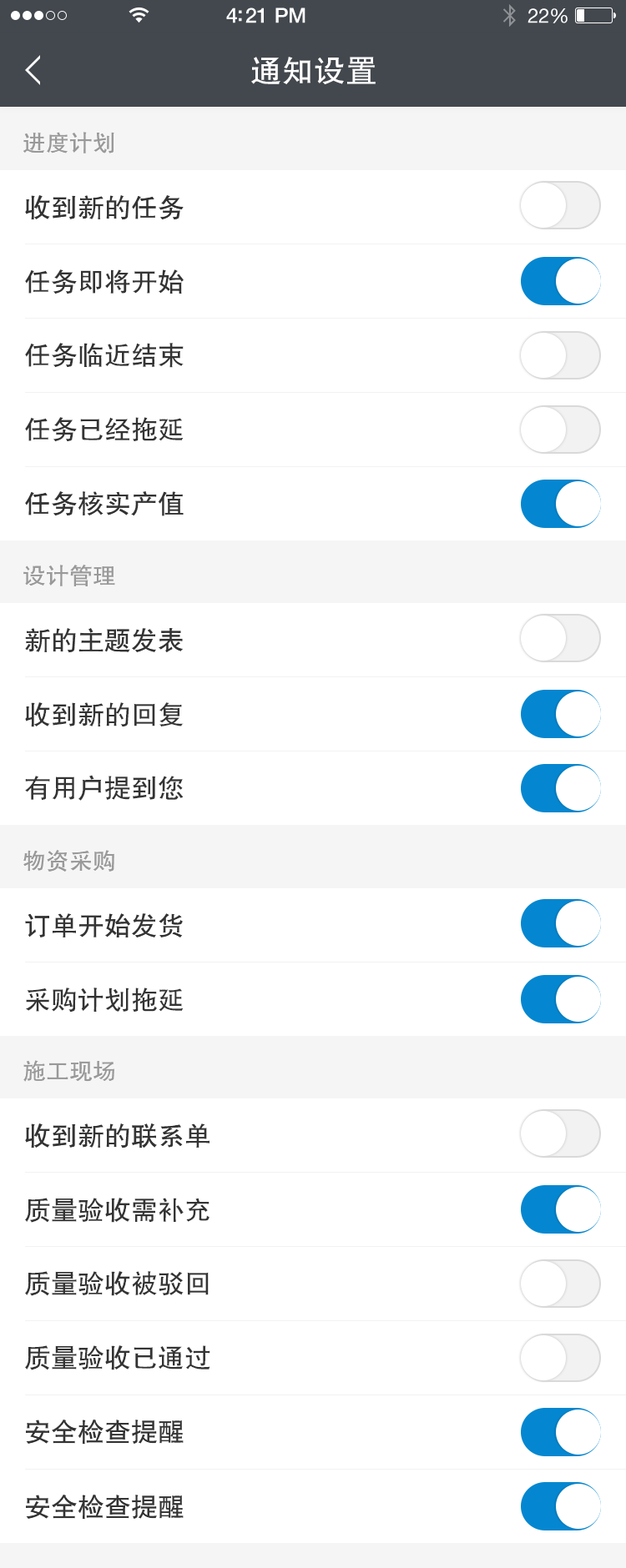
<style>
.page{position:relative;width:626px;height:1568px;background:#ffffff}
.page>*{position:absolute;margin:0}
.t1{font:31.7px "FZHTJW--GB1-0";color:#ffffff}
.t2{font:23.4px "FZHTJW--GB1-0";color:#999999}
.t3{font:26.7px "FZHTJW--GB1-0";color:#333333}
</style>
<div class="page">
<p class="t1" style="left:251px;top:57px;width:124px;height:27px">通知设置</p>
<p class="t2" style="left:23px;top:132px;width:91px;height:21px">进度计划</p>
<p class="t3" style="left:25px;top:195px;width:158px;height:25px">收到新的任务</p>
<p class="t3" style="left:25px;top:269px;width:158px;height:25px">任务即将开始</p>
<p class="t3" style="left:25px;top:343px;width:158px;height:25px">任务临近结束</p>
<p class="t3" style="left:25px;top:417px;width:158px;height:25px">任务已经拖延</p>
<p class="t3" style="left:25px;top:491px;width:158px;height:25px">任务核实产值</p>
<p class="t2" style="left:23px;top:565px;width:92px;height:21px">设计管理</p>
<p class="t3" style="left:25px;top:628px;width:158px;height:25px">新的主题发表</p>
<p class="t3" style="left:25px;top:702px;width:158px;height:25px">收到新的回复</p>
<p class="t3" style="left:25px;top:775px;width:158px;height:26px">有用户提到您</p>
<p class="t2" style="left:23px;top:850px;width:91px;height:22px">物资采购</p>
<p class="t3" style="left:25px;top:913px;width:158px;height:24px">订单开始发货</p>
<p class="t3" style="left:26px;top:988px;width:157px;height:24px">采购计划拖延</p>
<p class="t2" style="left:23px;top:1060px;width:91px;height:22px">施工现场</p>
<p class="t3" style="left:25px;top:1123px;width:184px;height:25px">收到新的联系单</p>
<p class="t3" style="left:25px;top:1198px;width:184px;height:25px">质量验收需补充</p>
<p class="t3" style="left:25px;top:1271px;width:184px;height:25px">质量验收被驳回</p>
<p class="t3" style="left:25px;top:1345px;width:185px;height:25px">质量验收已通过</p>
<p class="t3" style="left:26px;top:1420px;width:157px;height:25px">安全检查提醒</p>
<p class="t3" style="left:26px;top:1495px;width:157px;height:25px">安全检查提醒</p>
</div>
